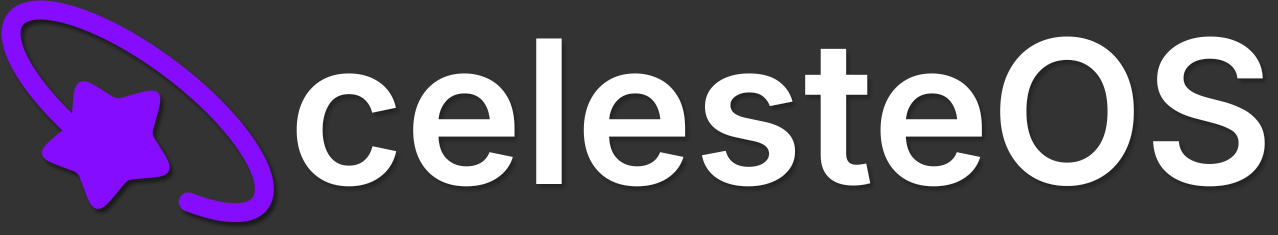
<style>
.page{position:relative;width:1278px;height:235px;background:#333333}
.page>*{position:absolute;margin:0}
.t1{font:200px "Inter-SemiBold";color:#ffffff}
</style>
<div class="page">
<p class="t1" style="left:295px;top:36px;width:971px;height:152px">celesteOS</p>
</div>
